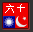
<style>
.page{position:relative;width:33px;height:32px;background:#f20000}
.page>*{position:absolute;margin:0}
.t1{font:10.4px "SimSun";color:#ffffff}
</style>
<div class="page">
<p class="t1" style="left:5px;top:4px;width:20px;height:9px">六十</p>
</div>
